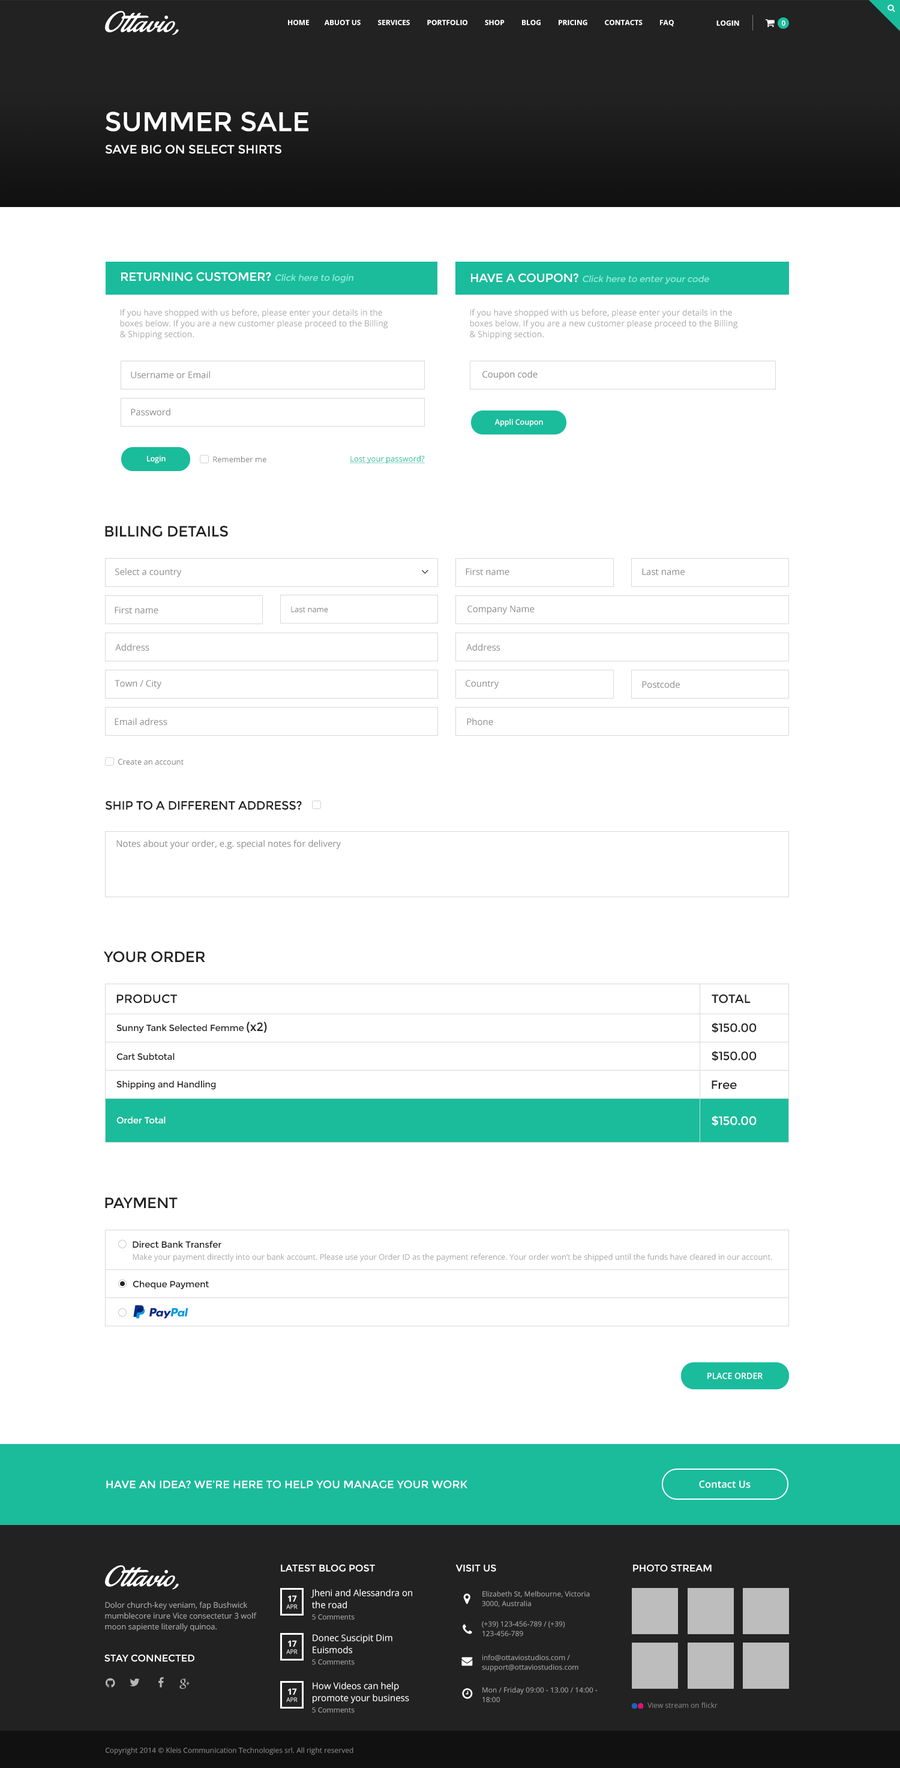
<style>
.page{position:relative;width:900px;height:1768px;background:#ffffff}
.page>*{position:absolute;margin:0}
.t1{font:7.2px "OpenSans-Bold";color:#ffffff;text-transform:uppercase}
.t2{font:7.2px "OpenSans-Semibold";color:#ffffff;text-transform:uppercase}
.t3{font:27px "Montserrat-Regular";color:#ffffff;text-transform:uppercase}
.t4{font:12px "Montserrat-Regular";color:#ffffff;text-transform:uppercase}
.t5{font:12px "Montserrat-Regular";letter-spacing:-0.017em;color:#ffffff;text-transform:uppercase}
.t6{font:9px "Montserrat-Regular";letter-spacing:-0.017em;color:#8cebd8;font-style:italic}
.t7{font:9px "Montserrat-Regular";letter-spacing:-0.017em;color:#8bead7;font-style:italic}
.t8{font:8.4px/10.8px "OpenSans";color:#a8a8a8}
.t9{font:9px "OpenSans";color:#878787}
.t10{font:9px "OpenSans";color:#828282}
.t11{font:7.7px "OpenSans-Semibold";color:#ffffff}
.t12{font:7.8px "OpenSans";color:#878787}
.t13{font:7.8px "OpenSans";color:#1abc9c;text-decoration:underline}
.t14{font:15px "Montserrat-Regular";letter-spacing:-0.017em;color:#222222;text-transform:uppercase}
.t15{font:7.8px "OpenSans";color:#828282}
.t16{font:12px "Montserrat-Regular";letter-spacing:-0.017em;color:#222222;text-transform:uppercase}
.t17{font:12px "Montserrat-Regular";color:#222222;text-transform:uppercase}
.t18{font:9px "Montserrat-Regular";letter-spacing:-0.017em;color:#222222}
.t19{font:12px "Montserrat-Regular";letter-spacing:-0.017em;color:#222222}
.t20{font:9px "Montserrat-Regular";letter-spacing:-0.017em;color:#ffffff}
.t21{font:12px "Montserrat-Regular";letter-spacing:-0.017em;color:#ffffff}
.t22{font:7.8px "OpenSans";color:#a8a8a8}
.t23{font:8.6px "OpenSans-Semibold";color:#ffffff;text-transform:uppercase}
.t24{font:10.8px "Montserrat-Regular";color:#ffffff;text-transform:uppercase}
.t25{font:10px "OpenSans-Semibold";color:#ffffff}
.t26{font:9.6px "Montserrat-Regular";color:#ffffff;text-transform:uppercase}
.t27{font:9px/12px "OpenSans";color:#ffffff}
.t28{font:7.8px/10.8px "OpenSans";color:#a8a8a8}
.t29{font:8.4px "OpenSans-Bold";color:#ffffff;text-transform:uppercase}
.t30{font:7.2px/9.6px "OpenSans";color:#a8a8a8}
.t31{font:6px "OpenSans";color:#ffffff;text-transform:uppercase}
.t32{font:7.2px "OpenSans";color:#a9a9a9}
.t33{font:7.2px "OpenSans";color:#878787}
</style>
<div class="page">
<p class="t1" style="left:288px;top:20px;width:386px;height:6px">Home        Abuot us         Services         Portfolio         Shop         Blog         Pricing         Contacts         Faq</p>
<p class="t1" style="left:716px;top:20px;width:23px;height:6px">Login</p>
<p class="t2" style="left:782px;top:20px;width:3px;height:6px">0</p>
<p class="t3" style="left:106px;top:112px;width:202px;height:19px">SUMMER SALE</p>
<p class="t4" style="left:105px;top:145px;width:176px;height:9px">Save big on select shirts</p>
<p class="t5" style="left:121px;top:272px;width:232px;height:11px">Returning customer? <span class="t6">Click here to login</span></p>
<p class="t7" style="left:471px;top:273px;width:238px;height:11px"><span class="t5">Have a coupon? </span>Click here to enter your code</p>
<p class="t8" style="left:120px;top:309px;width:268px;height:30px">If you have shopped with us before, please enter your details in the boxes below. If you are a new customer please proceed to the Billing &amp; Shipping section.</p>
<p class="t8" style="left:470px;top:309px;width:268px;height:30px">If you have shopped with us before, please enter your details in the boxes below. If you are a new customer please proceed to the Billing &amp; Shipping section.</p>
<p class="t9" style="left:131px;top:371px;width:79px;height:8px">Username or Email</p>
<p class="t10" style="left:482px;top:370px;width:56px;height:10px">Coupon code</p>
<p class="t9" style="left:131px;top:408px;width:39px;height:8px">Password</p>
<p class="t11" style="left:494px;top:419px;width:49px;height:8px">Appli Coupon</p>
<p class="t11" style="left:147px;top:455px;width:19px;height:8px">Login</p>
<p class="t12" style="left:213px;top:456px;width:53px;height:7px">Remember me</p>
<p class="t13" style="left:350px;top:455px;width:75px;height:8px">Lost your password?</p>
<p class="t14" style="left:105px;top:526px;width:123px;height:11px">Billing Details</p>
<p class="t9" style="left:115px;top:568px;width:67px;height:9px">Select a country</p>
<p class="t9" style="left:466px;top:568px;width:43px;height:7px">First name</p>
<p class="t9" style="left:642px;top:568px;width:43px;height:7px">Last name</p>
<p class="t15" style="left:291px;top:606px;width:37px;height:7px">Last name</p>
<p class="t9" style="left:467px;top:605px;width:68px;height:9px">Company Name</p>
<p class="t9" style="left:115px;top:607px;width:43px;height:7px">First name</p>
<p class="t9" style="left:115px;top:643px;width:34px;height:8px">Address</p>
<p class="t9" style="left:466px;top:643px;width:34px;height:8px">Address</p>
<p class="t9" style="left:115px;top:680px;width:46px;height:9px">Town / City</p>
<p class="t9" style="left:466px;top:680px;width:33px;height:9px">Country</p>
<p class="t9" style="left:642px;top:680px;width:38px;height:8px">Postcode</p>
<p class="t9" style="left:115px;top:718px;width:52px;height:7px">Email adress</p>
<p class="t9" style="left:467px;top:718px;width:26px;height:7px">Phone</p>
<p class="t15" style="left:118px;top:758px;width:66px;height:7px">Create an account</p>
<p class="t16" style="left:105px;top:800px;width:197px;height:10px">Ship to a different address?</p>
<p class="t9" style="left:116px;top:839px;width:225px;height:10px">Notes about your order, e.g. special notes for delivery</p>
<p class="t14" style="left:103px;top:951px;width:102px;height:11px">Your order</p>
<p class="t17" style="left:116px;top:994px;width:61px;height:9px">Product</p>
<p class="t17" style="left:712px;top:994px;width:39px;height:9px">Total</p>
<p class="t18" style="left:116px;top:1021px;width:151px;height:12px">Sunny Tank Selected Femme <span class="t19">(x2)</span></p>
<p class="t19" style="left:712px;top:1022px;width:45px;height:11px">$150.00</p>
<p class="t18" style="left:116px;top:1052px;width:59px;height:8px">Cart Subtotal</p>
<p class="t19" style="left:712px;top:1051px;width:45px;height:10px">$150.00</p>
<p class="t18" style="left:116px;top:1080px;width:100px;height:10px">Shipping and Handling</p>
<p class="t19" style="left:712px;top:1080px;width:25px;height:9px">Free</p>
<p class="t20" style="left:116px;top:1116px;width:50px;height:7px">Order Total</p>
<p class="t21" style="left:712px;top:1115px;width:45px;height:11px">$150.00</p>
<p class="t14" style="left:105px;top:1197px;width:73px;height:11px">Payment</p>
<p class="t18" style="left:133px;top:1240px;width:88px;height:7px">Direct Bank Transfer</p>
<p class="t22" style="left:133px;top:1253px;width:639px;height:8px">Make your payment directly into our bank account. Please use your Order ID as the payment reference. Your order won’t be shipped until the funds have cleared in our account.</p>
<p class="t18" style="left:133px;top:1280px;width:76px;height:9px">Cheque Payment</p>
<p class="t23" style="left:707px;top:1372px;width:56px;height:7px">Place Order</p>
<p class="t24" style="left:106px;top:1480px;width:361px;height:8px">HAVE AN IDEA? WE’RE HERE TO HELP YOU MANAGE YOUR WORK</p>
<p class="t25" style="left:699px;top:1480px;width:52px;height:8px">Contact Us</p>
<p class="t26" style="left:281px;top:1564px;width:94px;height:7px">Latest blog post</p>
<p class="t26" style="left:455px;top:1564px;width:41px;height:7px">Visit US</p>
<p class="t26" style="left:633px;top:1564px;width:79px;height:7px">Photo stream</p>
<p class="t27" style="left:311px;top:1589px;width:101px;height:19px">Jheni and Alessandra on <br>the road</p>
<p class="t28" style="left:105px;top:1601px;width:152px;height:30px">Dolor church-key veniam, fap Bushwick mumblecore irure Vice consectetur 3 wolf moon sapiente literally quinoa.</p>
<p class="t29" style="left:287px;top:1595px;width:10px;height:6px">17</p>
<p class="t30" style="left:482px;top:1591px;width:108px;height:16px">Elizabeth St, Melbourne, Victoria 3000, Australia</p>
<p class="t31" style="left:286px;top:1604px;width:12px;height:5px">apr</p>
<p class="t32" style="left:312px;top:1614px;width:43px;height:5px">5 Comments</p>
<p class="t30" style="left:482px;top:1621px;width:83px;height:15px">(+39) 123-456-789 / (+39) 123-456-789</p>
<p class="t27" style="left:313px;top:1634px;width:79px;height:19px">Donec Suscipit Dim <br>Euismods</p>
<p class="t31" style="left:286px;top:1649px;width:12px;height:5px">apr</p>
<p class="t29" style="left:287px;top:1640px;width:10px;height:6px">17</p>
<p class="t26" style="left:104px;top:1654px;width:90px;height:7px">Stay connected</p>
<p class="t32" style="left:312px;top:1659px;width:43px;height:5px">5 Comments</p>
<p class="t30" style="left:482px;top:1654px;width:96px;height:18px">info@ottaviostudios.com / support@ottaviostudios.com</p>
<p class="t27" style="left:313px;top:1682px;width:96px;height:21px">How Videos can help <br>promote your business</p>
<p class="t31" style="left:286px;top:1697px;width:12px;height:5px">apr</p>
<p class="t29" style="left:287px;top:1688px;width:10px;height:6px">17</p>
<p class="t30" style="left:482px;top:1687px;width:116px;height:15px">Mon / Friday 09:00 - 13.00 / 14:00 - 18:00</p>
<p class="t32" style="left:312px;top:1707px;width:43px;height:5px">5 Comments</p>
<p class="t33" style="left:647px;top:1702px;width:71px;height:6px">View stream on flickr</p>
<p class="t33" style="left:106px;top:1747px;width:247px;height:7px">Copyright 2014 © Kleis Communication Technologies srl. All right reserved</p>
</div>
